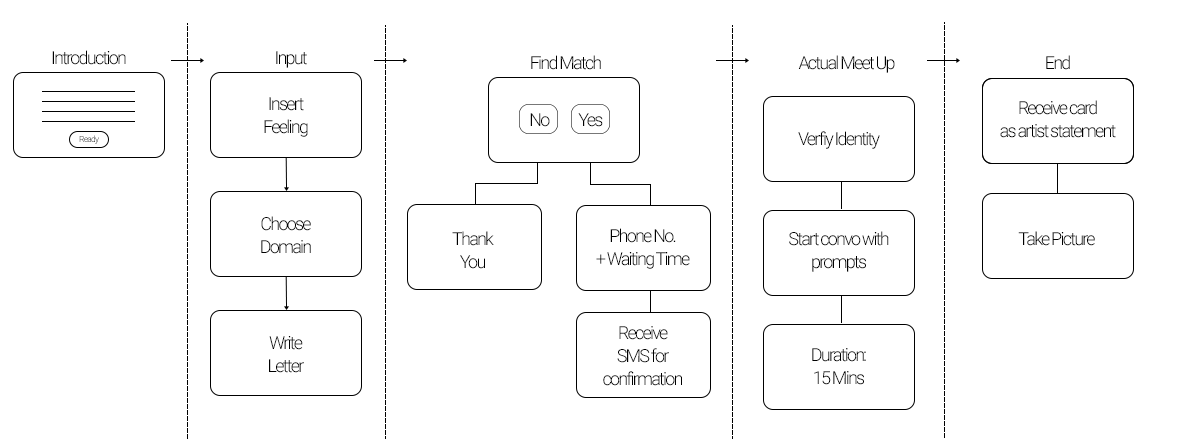
<style>
.page{position:relative;width:1190px;height:439px;background:#ffffff}
.page>*{position:absolute;margin:0}
.t1{font:18px "Roboto-Light";letter-spacing:-0.1em;color:#000000}
.t2{font:18px/23.4px "Roboto-Light";letter-spacing:-0.1em;color:#000000}
.t3{font:8.6px "Roboto-Light";letter-spacing:-0.1em}
</style>
<div class="page">
<p class="t1" style="left:52px;top:50px;width:74px;height:15px">Introduction</p>
<p class="t1" style="left:276px;top:51px;width:31px;height:17px">Input</p>
<p class="t1" style="left:531px;top:55px;width:70px;height:15px">Find Match</p>
<p class="t1" style="left:798px;top:55px;width:97px;height:18px">Actual Meet Up</p>
<p class="t1" style="left:1046px;top:55px;width:24px;height:15px">End</p>
<p class="t2" style="left:264px;top:97px;width:44px;height:40px;text-align:center">Insert<br>Feeling</p>
<p class="t2" style="left:1000px;top:100px;width:116px;height:38px;text-align:center">Receive card <br>as artist statement</p>
<p class="t1" style="left:530px;top:113px;width:20px;height:14px">No</p>
<p class="t1" style="left:578px;top:113px;width:25px;height:14px">Yes</p>
<p class="t3" style="left:79px;top:135px;width:20px;height:9px">Ready</p>
<p class="t1" style="left:798px;top:131px;width:82px;height:18px">Verfiy Identity</p>
<p class="t2" style="left:261px;top:216px;width:50px;height:38px;text-align:center">Choose<br>Domain</p>
<p class="t2" style="left:452px;top:231px;width:42px;height:38px;text-align:center">Thank<br>You</p>
<p class="t2" style="left:596px;top:228px;width:94px;height:41px;text-align:center">Phone No. <br>+ Waiting Time</p>
<p class="t2" style="left:789px;top:231px;width:100px;height:41px;text-align:center">Start convo with <br>prompts</p>
<p class="t1" style="left:1018px;top:231px;width:77px;height:15px">Take Picture</p>
<p class="t2" style="left:603px;top:326px;width:79px;height:60px;text-align:center">Receive <br>SMS for <br>confirmation</p>
<p class="t2" style="left:269px;top:336px;width:35px;height:37px;text-align:center">Write <br>Letter</p>
<p class="t2" style="left:812px;top:348px;width:54px;height:37px;text-align:center">Duration:<br>15 Mins</p>
</div>
